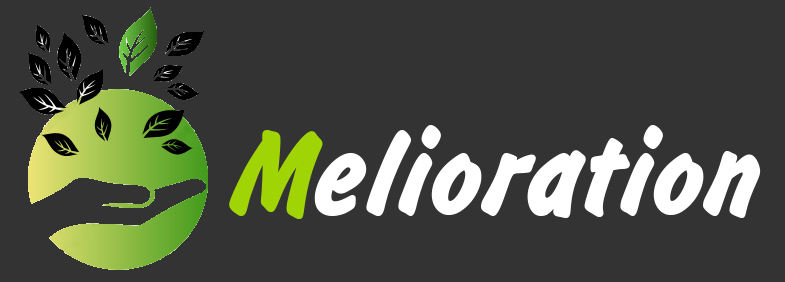
<style>
.page{position:relative;width:785px;height:282px;background:#333333}
.page>*{position:absolute;margin:0}
.t1{font:120px "Inform-Bold";color:#ffffff}
.t2{font:120px "Inform-Bold";color:#a0d405}
</style>
<div class="page">
<p class="t1" style="left:229px;top:125px;width:532px;height:94px"><span class="t2">M</span>elioration</p>
</div>
